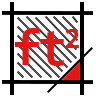
<style>
.page{position:relative;width:96px;height:96px;background:#ffffff}
.page>*{position:absolute;margin:0}
.t1{font:52px "Consolas-Bold";letter-spacing:-0.06em;color:#e81313}
</style>
<div class="page">
<p class="t1" style="left:15px;top:28px;width:64px;height:38px">ft2</p>
</div>
